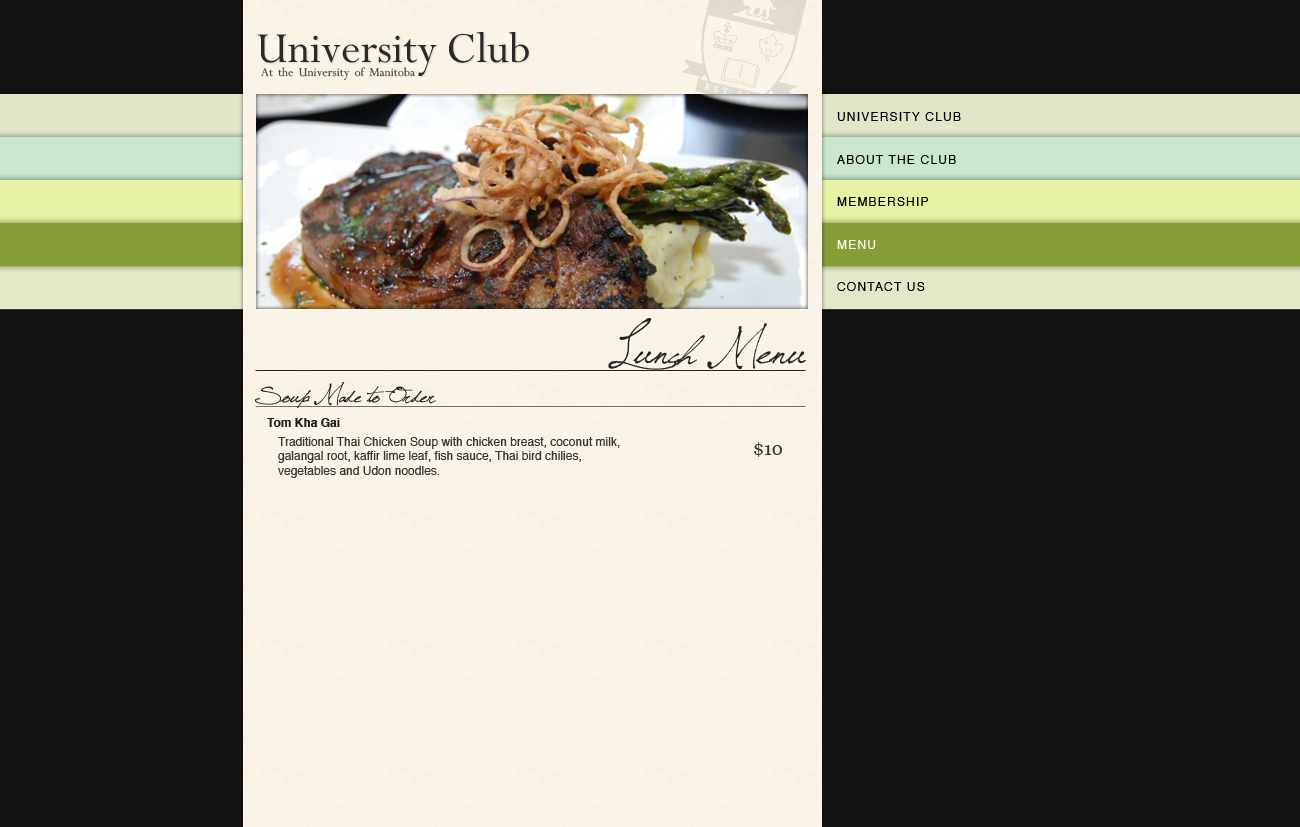
<style>
.page{position:relative;width:1300px;height:827px;background:#131313}
.page>*{position:absolute;margin:0}
.t1{font:48px "Oxford";color:#2a2a2a}
.t2{font:13.5px "Oxford";color:#494949}
.t3{font:12px/21.3px "Helvetica";letter-spacing:0.1em;color:#000000;text-transform:uppercase}
.t4{font:12px/21.3px "Helvetica";letter-spacing:0.1em;color:#ffffff;text-transform:uppercase}
.t5{font:48px "Jellyka,-Saint-Andrew's-Queen";color:#1e1e1e}
.t6{font:24px "Jellyka,-Saint-Andrew's-Queen";color:#1e1e1e}
.t7{font:12px "Helvetica-Bold";color:#1e1e1e}
.t8{font:12px "Helvetica";color:#363636}
.t9{font:18px "Georgia";color:#363636}
</style>
<div class="page">
<p class="t1" style="left:257px;top:31px;width:272px;height:45px">University Club</p>
<p class="t2" style="left:261px;top:67px;width:154px;height:14px">At the University of Manitoba</p>
<p class="t3" style="left:837px;top:112px;width:124px;height:179px">University Club<br><br>About the Club<br><br>Membership<br><br><span class="t4">Menu<br></span><br>Contact Us</p>
<p class="t5" style="left:608px;top:318px;width:198px;height:52px">Lunch Menu</p>
<p class="t6" style="left:255px;top:382px;width:181px;height:27px">Soup Made to Order</p>
<p class="t7" style="left:267px;top:418px;width:73px;height:9px">Tom Kha Gai</p>
<p class="t8" style="left:278px;top:437px;width:342px;height:41px">Traditional Thai Chicken Soup with chicken breast, coconut milk, <br>galangal root, kaffir lime leaf, fish sauce, Thai bird chilies, <br>vegetables and Udon noodles.</p>
<p class="t9" style="left:754px;top:442px;width:28px;height:15px">$10</p>
</div>
